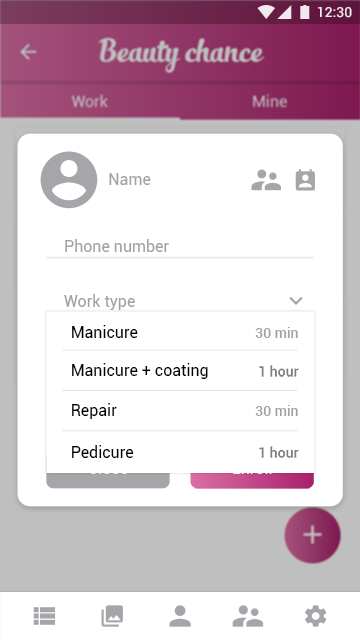
<style>
.page{position:relative;width:360px;height:640px;background:#ffffff}
.page>*{position:absolute;margin:0}
.t1{font:14px "Roboto-Medium";color:#ffffff}
.t2{font:16px "Roboto-Regular";color:#a1a1a1}
.t3{font:16px "Roboto-Regular";color:#000000}
.t4{font:14px "Roboto-Medium";color:#a1a1a1}
.t5{font:14px "Roboto-Medium";color:#7f7f7f}
</style>
<div class="page">
<p class="t1" style="left:318px;top:7px;width:34px;height:11px">12:30</p>
<p class="t2" style="left:109px;top:173px;width:42px;height:12px">Name</p>
<p class="t2" style="left:65px;top:239px;width:104px;height:13px">Phone number</p>
<p class="t2" style="left:64px;top:294px;width:71px;height:16px">Work type</p>
<p class="t3" style="left:72px;top:325px;width:66px;height:13px">Manicure</p>
<p class="t4" style="left:255px;top:327px;width:43px;height:11px">30 min</p>
<p class="t3" style="left:72px;top:363px;width:136px;height:16px">Manicure + coating</p>
<p class="t5" style="left:259px;top:365px;width:40px;height:12px">1 hour</p>
<p class="t3" style="left:72px;top:403px;width:45px;height:16px">Repair</p>
<p class="t4" style="left:255px;top:405px;width:43px;height:11px">30 min</p>
<p class="t3" style="left:72px;top:445px;width:62px;height:13px">Pedicure</p>
<p class="t5" style="left:259px;top:446px;width:40px;height:12px">1 hour</p>
</div>
